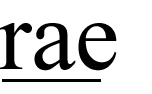
<style>
.page{position:relative;width:152px;height:94px;background:#ffffff}
.page>*{position:absolute;margin:0}
.t1{font:100px "TimesNewRomanPSMT";color:#000000}
</style>
<div class="page">
<p class="t1" style="left:0px;top:23px;width:117px;height:48px">rae</p>
</div>
